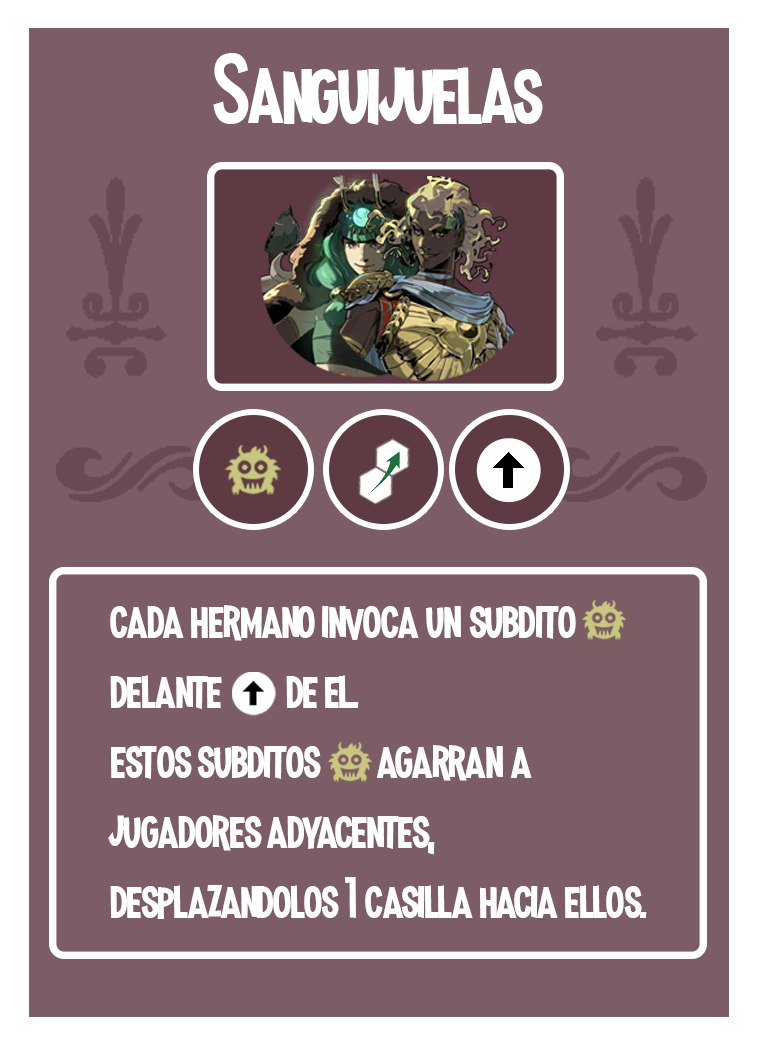
<style>
.page{position:relative;width:758px;height:1047px;background:#7d5d65}
.page>*{position:absolute;margin:0}
.t1{font:100px "MadnessHyperactive";color:#ffffff}
.t2{font:58.3px "MadnessHyperactive";color:#ffffff}
</style>
<div class="page">
<p class="t1" style="left:213px;top:53px;width:330px;height:72px">Sanguijuelas</p>
<p class="t2" style="left:108px;top:605px;width:539px;height:314px">cada hermano invoca un subdito            delante        de el.<br>estos subditos       agarran a jugadores adyacentes, desplazandolos 1 casilla hacia ellos.</p>
</div>
